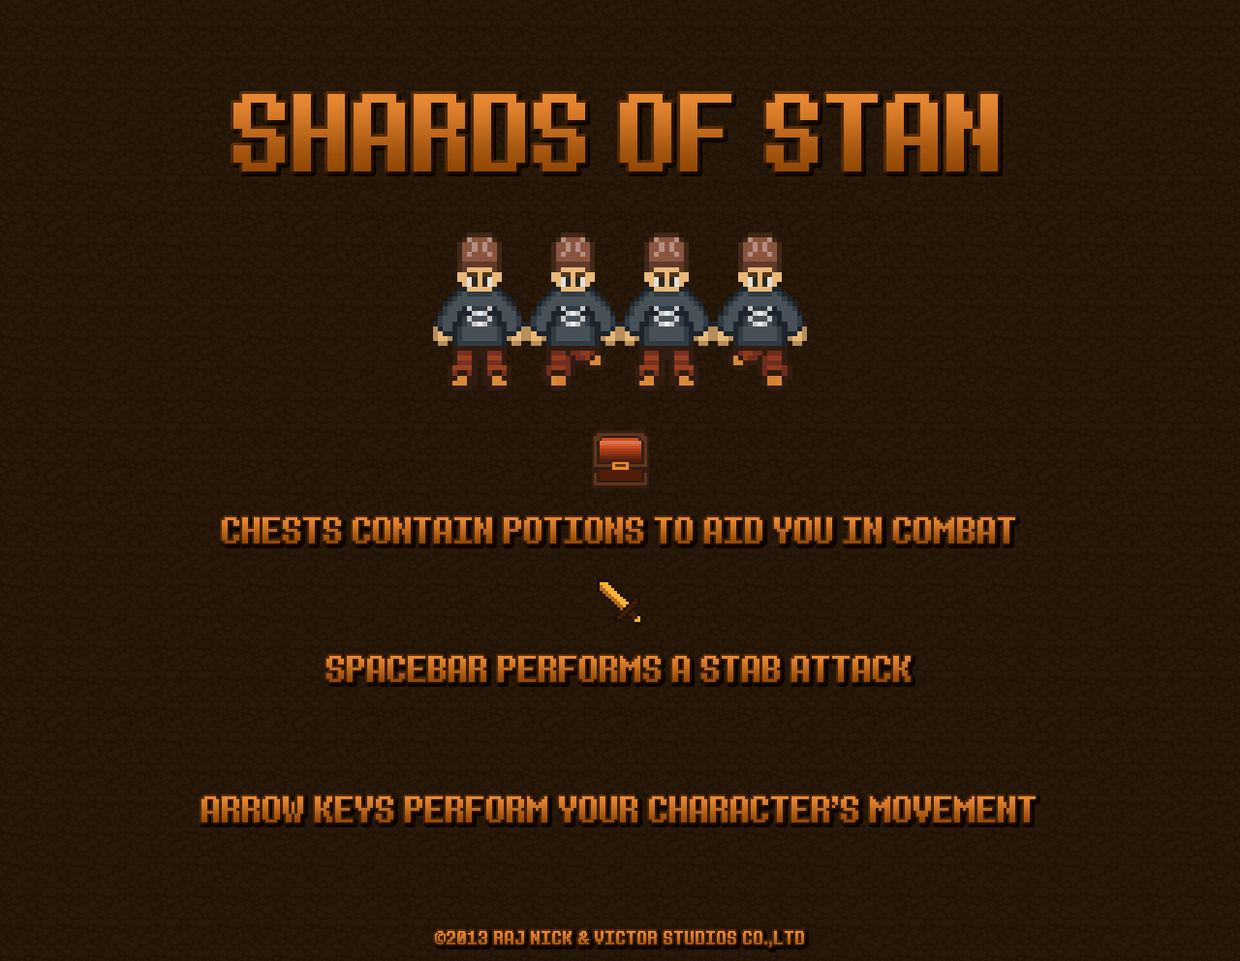
<style>
.page{position:relative;width:1240px;height:961px;background:#281809}
.page>*{position:absolute;margin:0}
.t1{font:137.6px "8bitoperator-JVE"}
.t2{font:46.5px "8bitoperator-JVE"}
.t3{font:23.3px "8bitoperator-JVE"}
</style>
<div class="page">
<p class="t1" style="left:234px;top:94px;width:764px;height:78px">SHARDS OF STAN</p>
<p class="t2" style="left:222px;top:517px;width:794px;height:27px">CHESTS CONTAIN POTIONS TO AID YOU IN COMBAT</p>
<p class="t2" style="left:327px;top:656px;width:584px;height:26px">SPACEBAR PERFORMS A STAB ATTACK</p>
<p class="t2" style="left:202px;top:797px;width:834px;height:26px">ARROW KEYS PERFORM YOUR CHARACTER’S MOVEMENT</p>
<p class="t3" style="left:435px;top:931px;width:369px;height:17px">©2013 RAJ NICK &amp; VICTOR STUDIOS CO.,LTD</p>
</div>
